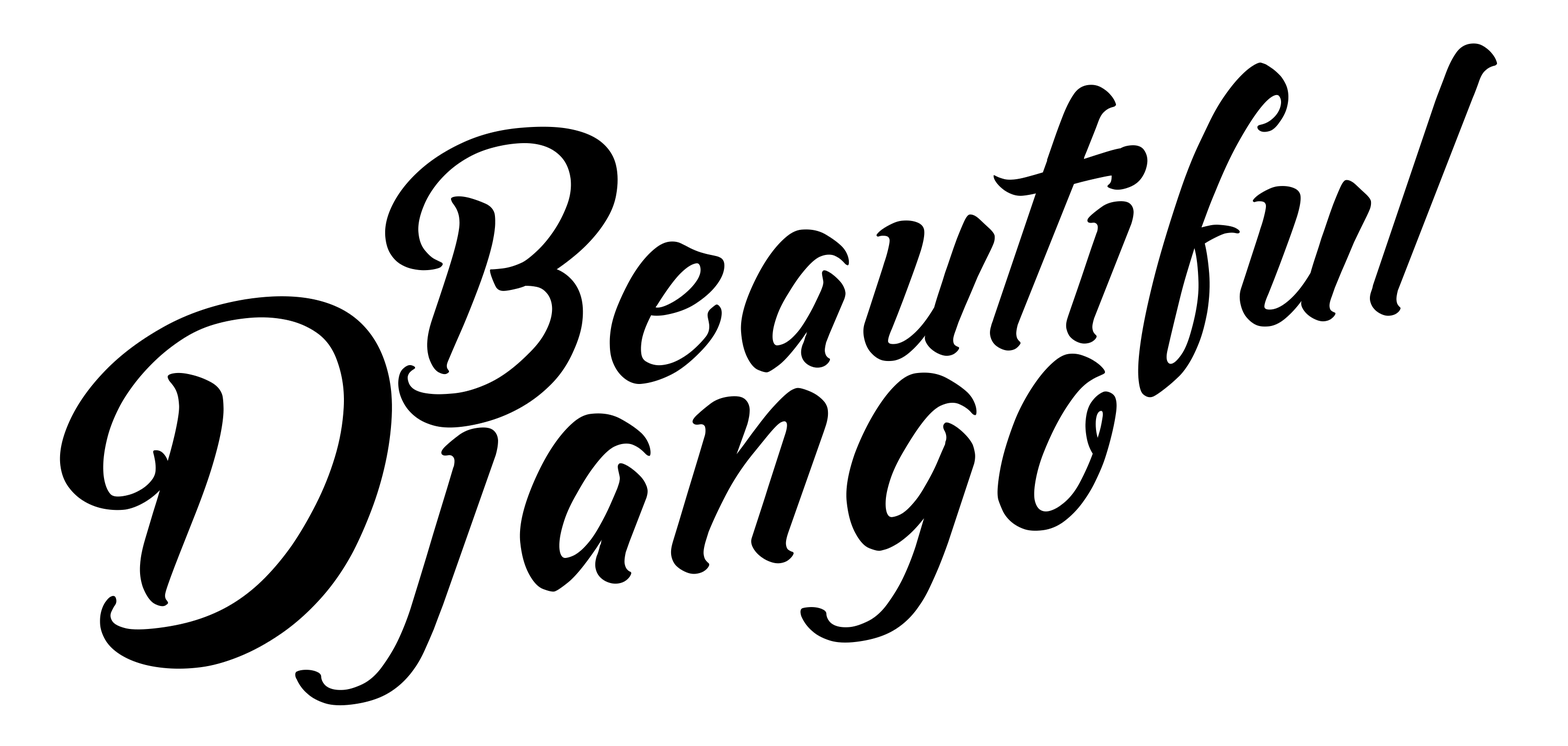
<style>
.page{position:relative;width:1568px;height:746px;background:#ffffff}
.page>*{position:absolute;margin:0}
.t1{font:368.7px "AsiyahScript";letter-spacing:0.025em;color:#000000}
.t2{font:455.7px "AsiyahScript";letter-spacing:0.025em;color:#000000}
</style>
<div class="page">
<p class="t1" style="left:385px;top:43px;width:1112px;height:385px;rotate:-5deg">Beautiful</p>
<p class="t2" style="left:60px;top:296px;width:1057px;height:410px;rotate:-7deg">Django</p>
</div>
